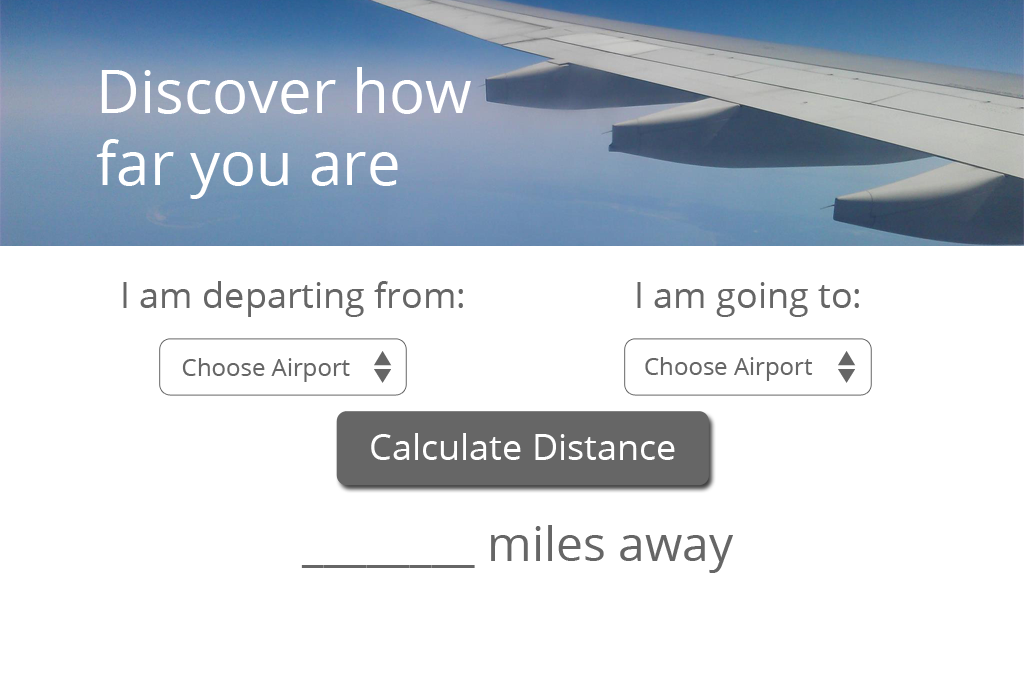
<style>
.page{position:relative;width:1024px;height:700px;background:#ffffff}
.page>*{position:absolute;margin:0}
.t1{font:60px "OpenSans";color:#ffffff}
.t2{font:36px "OpenSans";color:#666666}
.t3{font:24px "OpenSans";color:#666666}
.t4{font:36px "OpenSans";color:#ffffff}
.t5{font:48px "OpenSans";color:#666666}
</style>
<div class="page">
<p class="t1" style="left:96px;top:67px;width:375px;height:132px">Discover how far you are</p>
<p class="t2" style="left:123px;top:281px;width:340px;height:36px">I am departing from:</p>
<p class="t2" style="left:637px;top:282px;width:222px;height:35px">I am going to:</p>
<p class="t3" style="left:182px;top:358px;width:168px;height:24px">Choose Airport</p>
<p class="t3" style="left:645px;top:357px;width:168px;height:24px">Choose Airport</p>
<p class="t4" style="left:371px;top:433px;width:304px;height:27px">Calculate Distance</p>
<p class="t5" style="left:301px;top:525px;width:432px;height:48px">________ miles away</p>
</div>
